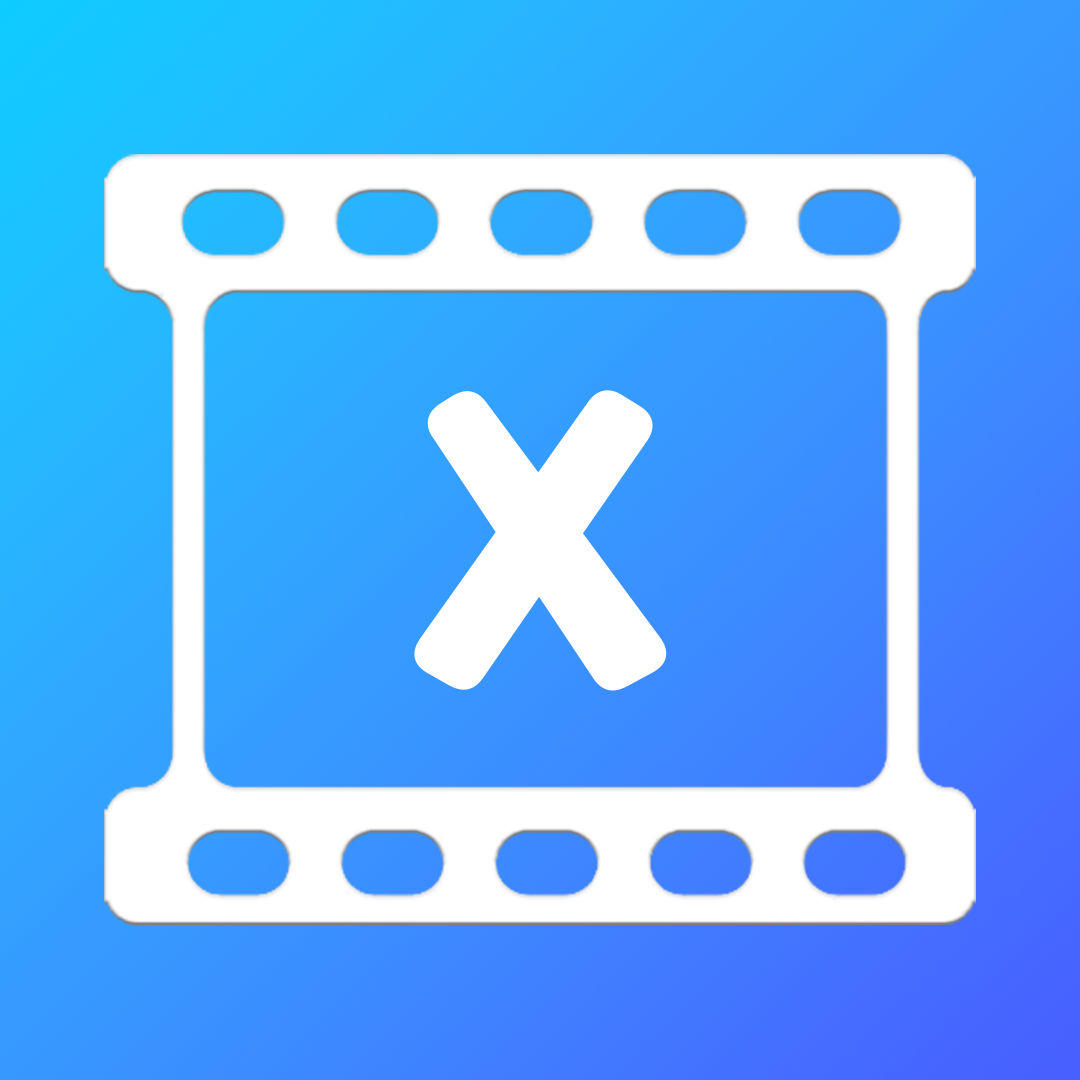
<style>
.page{position:relative;width:1080px;height:1080px;background:#ffffff}
.page>*{position:absolute;margin:0}
.t1{font:416.7px "zihun144hao-langyuanti";color:#ffffff}
</style>
<div class="page">
<p class="t1" style="left:414px;top:390px;width:253px;height:301px">X</p>
</div>
